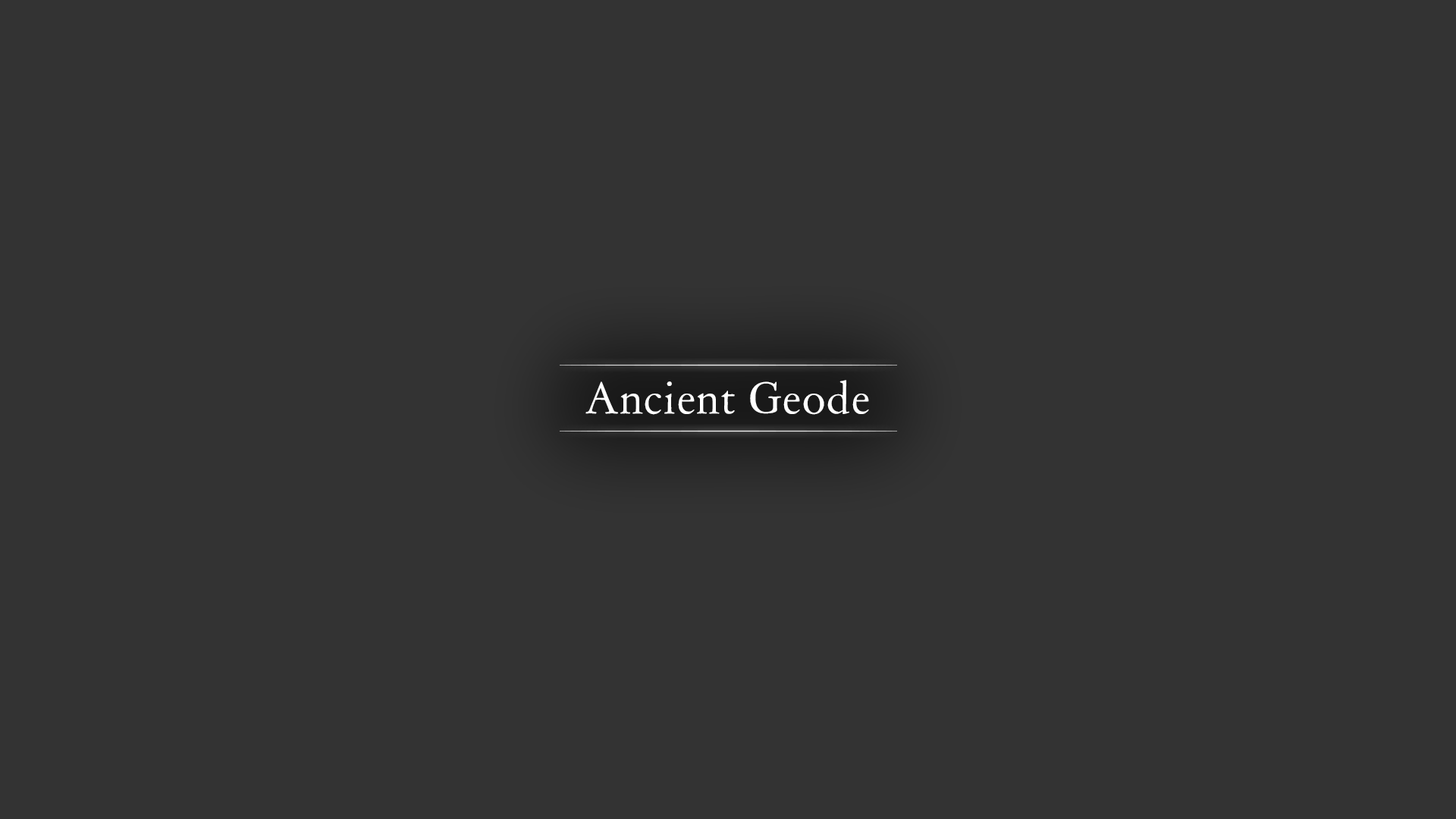
<style>
.page{position:relative;width:1456px;height:819px;background:#333333}
.page>*{position:absolute;margin:0}
.t1{font:42.5px "DayRoman";color:#ffffff}
</style>
<div class="page">
<p class="t1" style="left:585px;top:380px;width:284px;height:35px">Ancient Geode</p>
</div>
